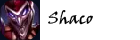
<style>
.page{position:relative;width:140px;height:40px;background:#ffffff}
.page>*{position:absolute;margin:0}
.t1{font:12px "VinerHandITC";color:#000000}
</style>
<div class="page">
<p class="t1" style="left:48px;top:10px;width:45px;height:15px">Shaco</p>
</div>
